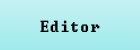
<style>
.page{position:relative;width:140px;height:50px}
.page>*{position:absolute;margin:0}
.t1{font:15px "Terminal";color:#000000;scale:0.91 1}
</style>
<div class="page">
<p class="t1" style="left:40px;top:20px;width:60px;height:12px">Editor</p>
</div>
